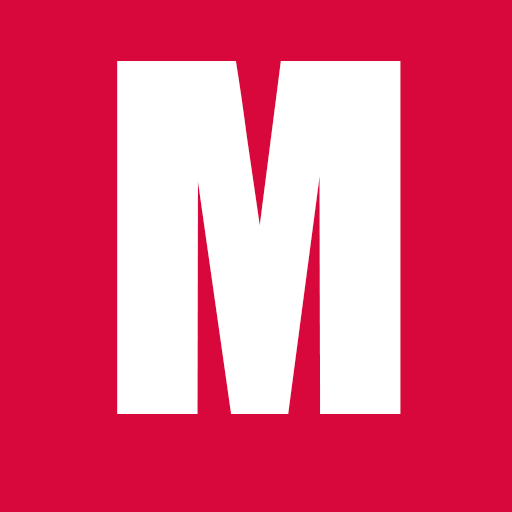
<style>
.page{position:relative;width:512px;height:512px;background:#d9083c}
.page>*{position:absolute;margin:0}
.t1{font:445.8px "Impact";color:#ffffff}
</style>
<div class="page">
<p class="t1" style="left:117px;top:61px;width:284px;height:353px">M</p>
</div>
